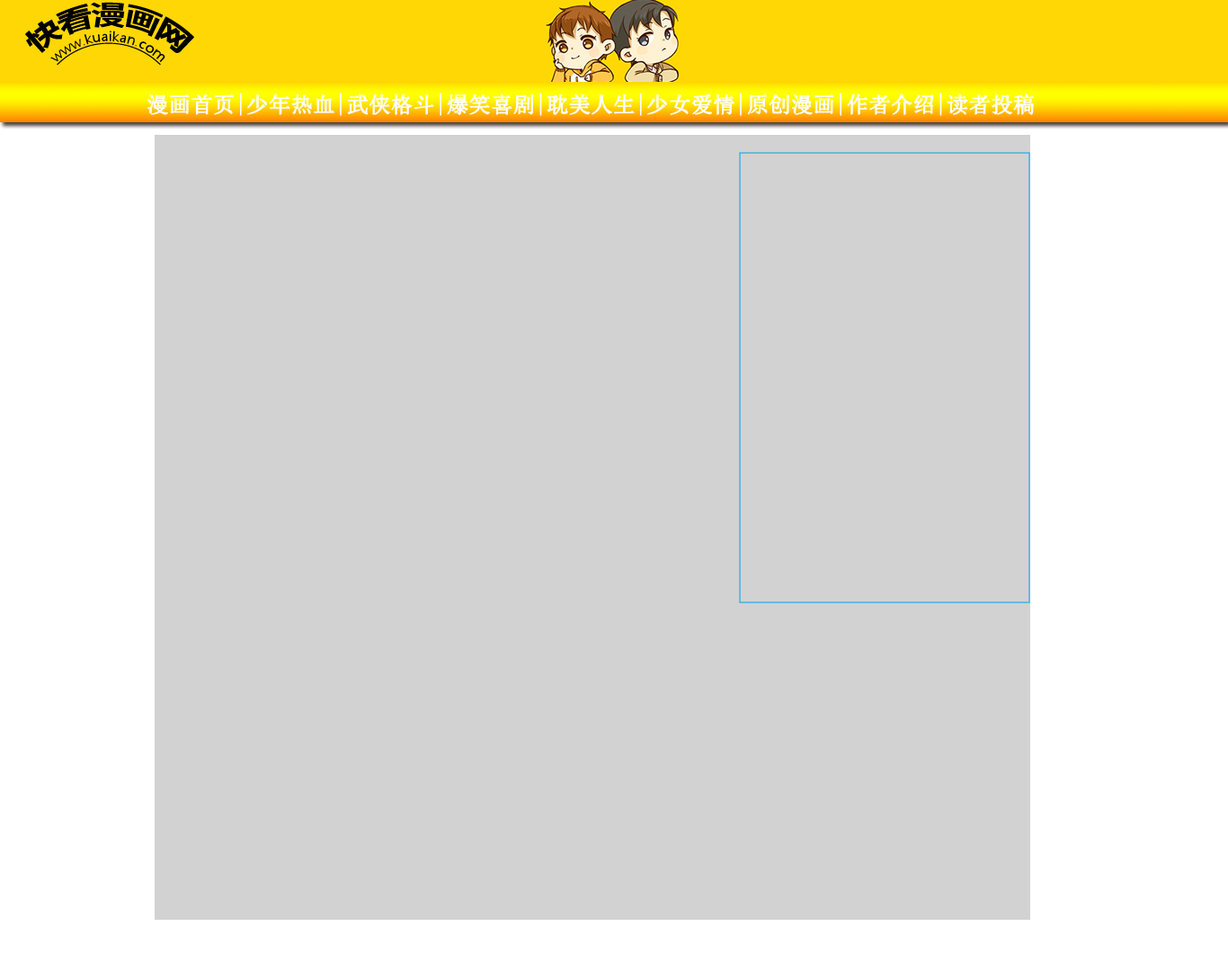
<style>
.page{position:relative;width:1228px;height:971px;background:#d2d2d2}
.page>*{position:absolute;margin:0}
.t1{font:21.6px "SimSun";color:#ffffff;font-weight:bold}
</style>
<div class="page">
<p class="t1" style="left:147px;top:93px;width:887px;height:23px">漫画首页|少年热血|武侠格斗|爆笑喜剧|耽美人生|少女爱情|原创漫画|作者介绍|读者投稿</p>
</div>
